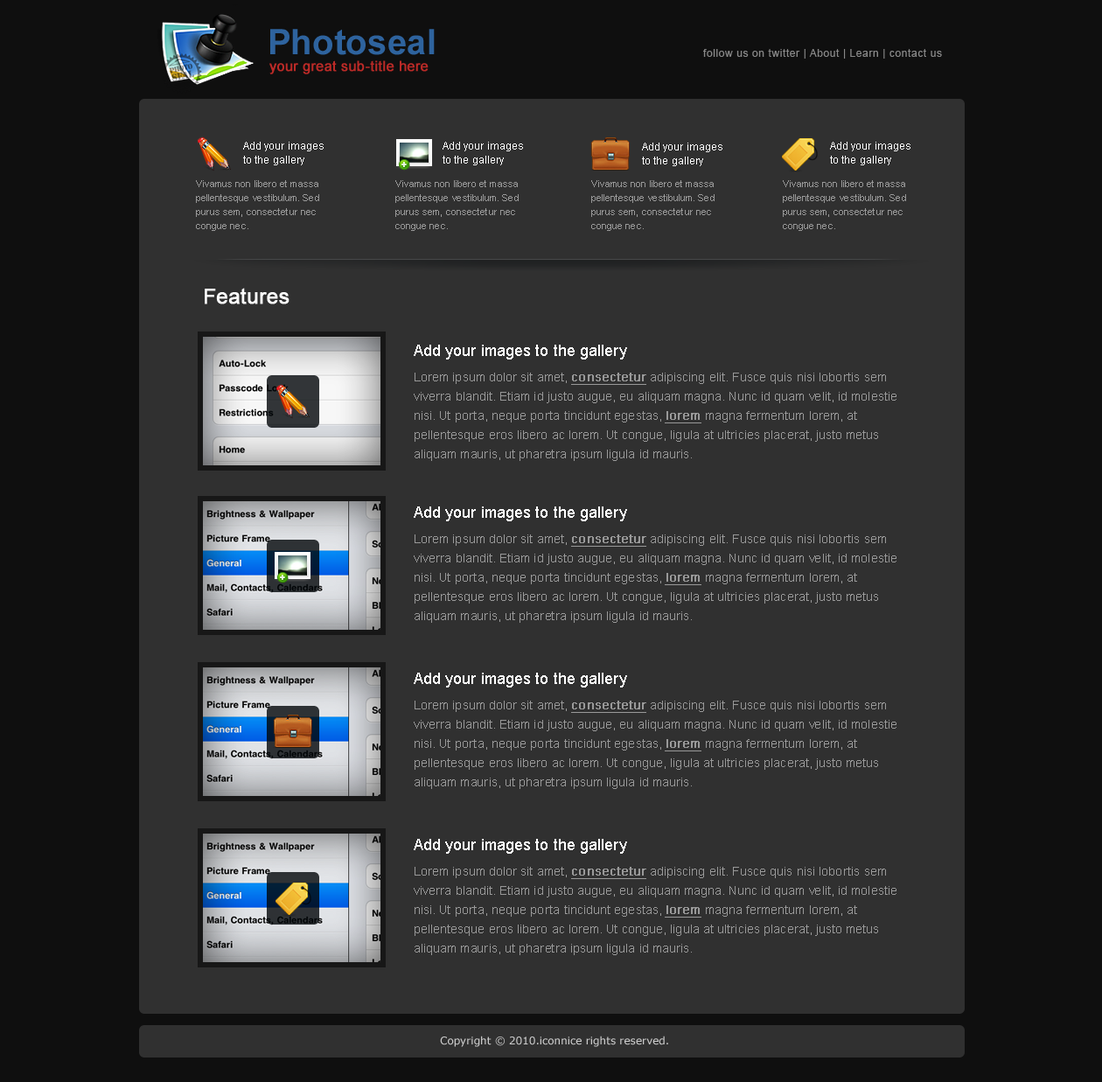
<style>
.page{position:relative;width:1102px;height:1082px;background:#303030}
.page>*{position:absolute;margin:0}
.t1{font:35px "Arial-BoldMT";letter-spacing:0.01em;color:#2e639e}
.t2{font:10.5px "ArialMT";letter-spacing:0.05em;color:#888888}
.t3{font:14px "ArialMT";letter-spacing:0.01em;color:#bc2a27;font-weight:bold}
.t4{font:10.5px/14px "ArialMT";letter-spacing:0.01em;color:#ffffff}
.t5{font:9.6px/14px "ArialMT";letter-spacing:0.01em;color:#999999}
.t6{font:21px "ArialMT";letter-spacing:0.01em;color:#ffffff;font-weight:bold}
.t7{font:15.7px "ArialMT";letter-spacing:0.01em;color:#ffffff}
.t8{font:12.2px/19.2px "ArialMT";letter-spacing:0.01em;color:#999999}
.t9{font:12.2px/19.2px "ArialMT";letter-spacing:0.01em;color:#999999;font-weight:bold;text-decoration:underline}
.t10{font:10.5px "Verdana";color:#cbcbcb}
</style>
<div class="page">
<p class="t1" style="left:270px;top:29px;width:165px;height:26px">Photoseal</p>
<p class="t2" style="left:703px;top:49px;width:239px;height:10px">follow us on twitter | About | Learn | contact us</p>
<p class="t3" style="left:269px;top:60px;width:160px;height:14px">your great sub-title here</p>
<p class="t4" style="left:243px;top:142px;width:81px;height:23px">Add your images to the gallery</p>
<p class="t4" style="left:443px;top:142px;width:80px;height:23px">Add your images to the gallery</p>
<p class="t4" style="left:642px;top:143px;width:80px;height:23px">Add your images to the gallery</p>
<p class="t4" style="left:830px;top:142px;width:81px;height:23px">Add your images to the gallery</p>
<p class="t5" style="left:196px;top:180px;width:123px;height:51px">Vivamus non libero et massa pellentesque vestibulum. Sed purus sem, consectetur nec congue nec.</p>
<p class="t5" style="left:395px;top:180px;width:124px;height:51px">Vivamus non libero et massa pellentesque vestibulum. Sed purus sem, consectetur nec congue nec.</p>
<p class="t5" style="left:591px;top:180px;width:124px;height:51px">Vivamus non libero et massa pellentesque vestibulum. Sed purus sem, consectetur nec congue nec.</p>
<p class="t5" style="left:783px;top:180px;width:123px;height:51px">Vivamus non libero et massa pellentesque vestibulum. Sed purus sem, consectetur nec congue nec.</p>
<p class="t6" style="left:205px;top:288px;width:85px;height:16px">Features</p>
<p class="t7" style="left:414px;top:345px;width:213px;height:14px">Add your images to the gallery</p>
<p class="t8" style="left:414px;top:373px;width:483px;height:88px">Lorem ipsum dolor sit amet, <span class="t9">consectetur</span> adipiscing elit. Fusce quis nisi lobortis sem viverra blandit. Etiam id justo augue, eu aliquam magna. Nunc id quam velit, id molestie nisi. Ut porta, neque porta tincidunt egestas, <span class="t9">lorem</span> magna fermentum lorem, at pellentesque eros libero ac lorem. Ut congue, ligula at ultricies placerat, justo metus aliquam mauris, ut pharetra ipsum ligula id mauris.</p>
<p class="t7" style="left:414px;top:506px;width:213px;height:15px">Add your images to the gallery</p>
<p class="t8" style="left:414px;top:534px;width:483px;height:89px">Lorem ipsum dolor sit amet, <span class="t9">consectetur</span> adipiscing elit. Fusce quis nisi lobortis sem viverra blandit. Etiam id justo augue, eu aliquam magna. Nunc id quam velit, id molestie nisi. Ut porta, neque porta tincidunt egestas, <span class="t9">lorem</span> magna fermentum lorem, at pellentesque eros libero ac lorem. Ut congue, ligula at ultricies placerat, justo metus aliquam mauris, ut pharetra ipsum ligula id mauris.</p>
<p class="t7" style="left:414px;top:673px;width:213px;height:14px">Add your images to the gallery</p>
<p class="t8" style="left:414px;top:701px;width:483px;height:88px">Lorem ipsum dolor sit amet, <span class="t9">consectetur</span> adipiscing elit. Fusce quis nisi lobortis sem viverra blandit. Etiam id justo augue, eu aliquam magna. Nunc id quam velit, id molestie nisi. Ut porta, neque porta tincidunt egestas, <span class="t9">lorem</span> magna fermentum lorem, at pellentesque eros libero ac lorem. Ut congue, ligula at ultricies placerat, justo metus aliquam mauris, ut pharetra ipsum ligula id mauris.</p>
<p class="t7" style="left:414px;top:839px;width:213px;height:15px">Add your images to the gallery</p>
<p class="t8" style="left:414px;top:867px;width:483px;height:88px">Lorem ipsum dolor sit amet, <span class="t9">consectetur</span> adipiscing elit. Fusce quis nisi lobortis sem viverra blandit. Etiam id justo augue, eu aliquam magna. Nunc id quam velit, id molestie nisi. Ut porta, neque porta tincidunt egestas, <span class="t9">lorem</span> magna fermentum lorem, at pellentesque eros libero ac lorem. Ut congue, ligula at ultricies placerat, justo metus aliquam mauris, ut pharetra ipsum ligula id mauris.</p>
<p class="t10" style="left:440px;top:1036px;width:228px;height:11px">Copyright © 2010.iconnice rights reserved.</p>
</div>
